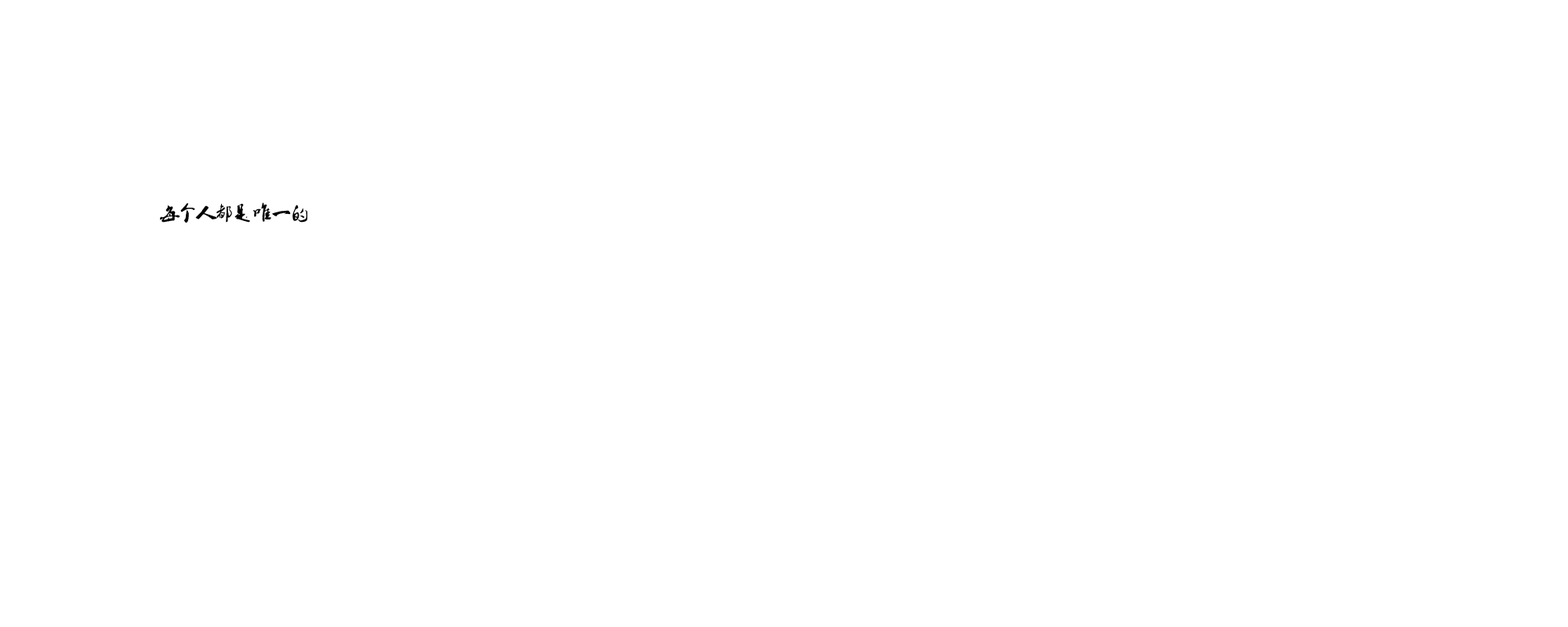
<style>
.page{position:relative;width:1568px;height:627px;background:#ffffff}
.page>*{position:absolute;margin:0}
.t1{font:18.8px "Ò¶¸ùÓÑÃ«±ÊÐÐÊé";color:#000000}
</style>
<div class="page">
<p class="t1" style="left:160px;top:202px;width:147px;height:21px">每个人都是唯一的</p>
</div>
